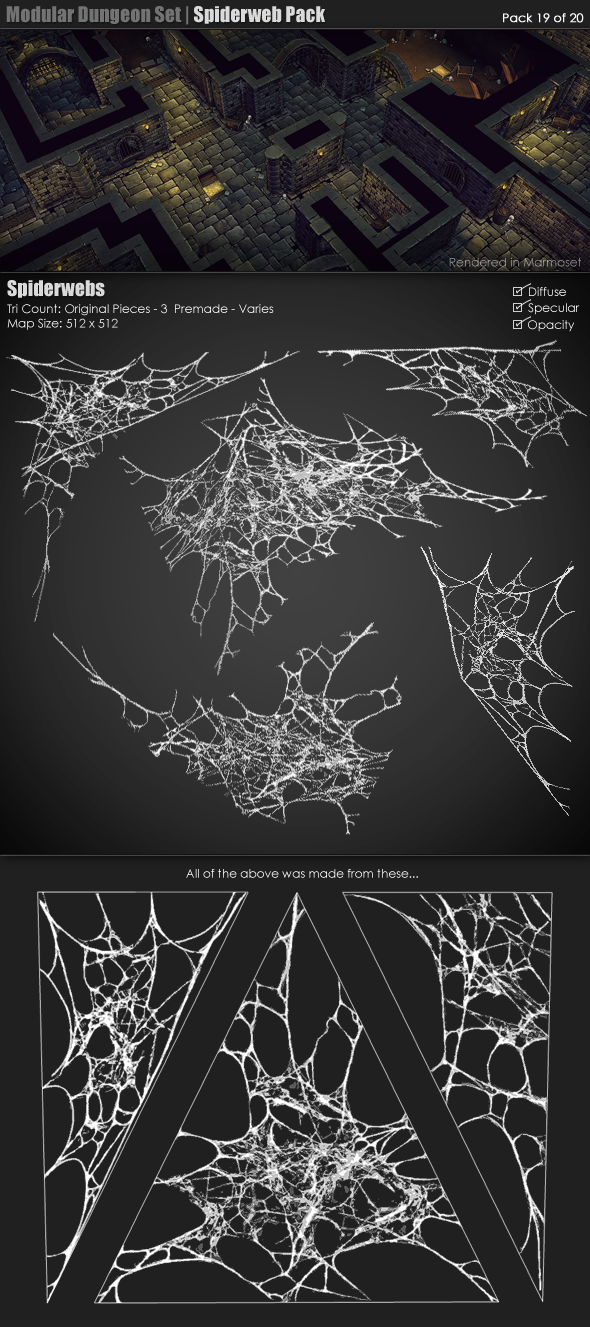
<style>
.page{position:relative;width:590px;height:1327px;background:#202020}
.page>*{position:absolute;margin:0}
.t1{font:20px "Impact";color:#737373}
.t2{font:20px "Impact";color:#dadada}
.t3{font:12px "CenturyGothic";color:#ffffff;font-weight:bold}
.t4{font:12px "CenturyGothic";color:#a0a09c}
.t5{font:12px "CenturyGothic";color:#ffffff}
.t6{font:12px "CenturyGothic"}
</style>
<div class="page">
<p class="t1" style="left:6px;top:6px;width:319px;height:19px">Modular Dungeon Set |<span class="t2"> Spiderweb Pack</span></p>
<p class="t3" style="left:503px;top:13px;width:81px;height:10px">Pack 19 of 20</p>
<p class="t4" style="left:449px;top:257px;width:132px;height:10px">Rendered in Marmoset</p>
<p class="t2" style="left:7px;top:280px;width:98px;height:18px">Spiderwebs</p>
<p class="t5" style="left:7px;top:304px;width:267px;height:26px">Tri Count: Original Pieces - 3  Premade - Varies<br>Map Size: 512 x 512</p>
<p class="t6" style="left:186px;top:869px;width:232px;height:9px">All of the above was made from these...</p>
</div>
